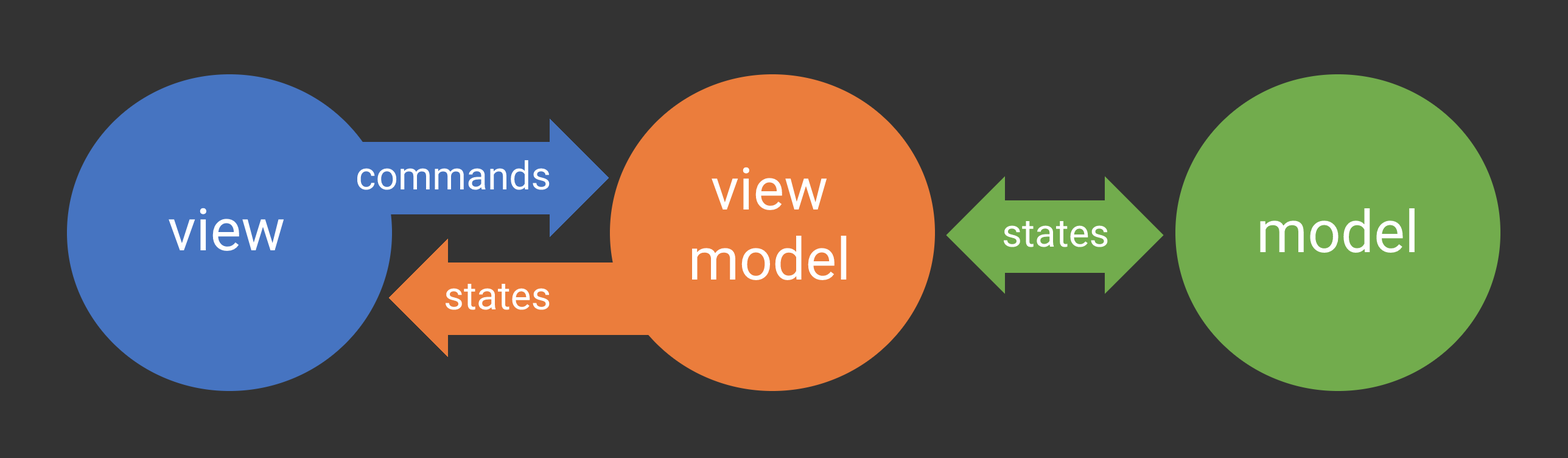
<style>
.page{position:relative;width:1568px;height:458px;background:#333333}
.page>*{position:absolute;margin:0}
.t1{font:39px "Roboto-Regular";color:#ffffff}
.t2{font:58.4px "Roboto-Regular";color:#ffffff}
</style>
<div class="page">
<p class="t1" style="left:357px;top:160px;width:193px;height:30px">commands</p>
<p class="t2" style="left:691px;top:167px;width:156px;height:113px;text-align:center">view<br>model</p>
<p class="t2" style="left:169px;top:208px;width:115px;height:43px">view</p>
<p class="t2" style="left:1260px;top:208px;width:155px;height:45px">model</p>
<p class="t1" style="left:1003px;top:221px;width:105px;height:26px">states</p>
<p class="t1" style="left:445px;top:284px;width:105px;height:26px">states</p>
</div>
